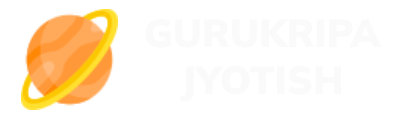
<style>
.page{position:relative;width:417px;height:121px;background:#ffffff}
.page>*{position:absolute;margin:0}
.t1{font:39px "Mulish-Black";color:#fafafa}
</style>
<div class="page">
<p class="t1" style="left:145px;top:19px;width:237px;height:83px;text-align:center">GURUKRIPA<br>JYOTISH</p>
</div>
